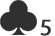
<style>
.page{position:relative;width:55px;height:36px;background:#ffffff}
.page>*{position:absolute;margin:0}
.t1{font:23.4px "MyriadPro-Regular";letter-spacing:-0.1em;color:#303030;font-weight:bold}
</style>
<div class="page">
<p class="t1" style="left:40px;top:19px;width:11px;height:17px">5</p>
</div>
